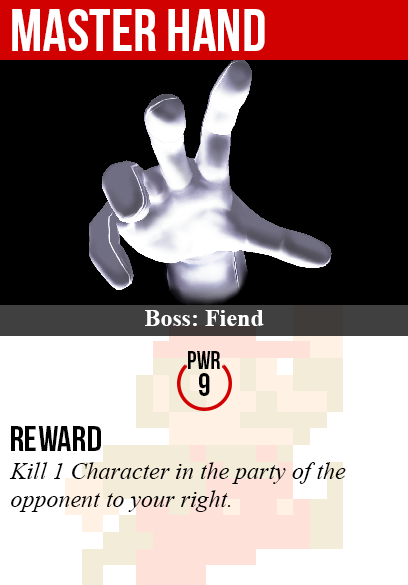
<style>
.page{position:relative;width:408px;height:585px;background:#000000}
.page>*{position:absolute;margin:0}
.t1{font:60px "BebasNeue";color:#ffffff}
.t2{font:24px "TimesNewRomanPS-BoldMT";color:#ffffff}
.t3{font:25px "BebasNeue";color:#000000}
.t4{font:32px "BebasNeue";color:#000000}
.t5{font:36px "BebasNeue";color:#000000}
.t6{font:24px "TimesNewRomanPS-ItalicMT";color:#000000}
</style>
<div class="page">
<p class="t1" style="left:12px;top:9px;width:253px;height:42px">master hand</p>
<p class="t2" style="left:145px;top:310px;width:119px;height:16px">Boss: Fiend</p>
<p class="t3" style="left:188px;top:351px;width:32px;height:18px">pwr</p>
<p class="t4" style="left:199px;top:373px;width:11px;height:23px">9</p>
<p class="t5" style="left:11px;top:426px;width:90px;height:25px">reward</p>
<p class="t6" style="left:9px;top:462px;width:337px;height:50px">Kill 1 Character in the party of the<br>opponent to your right.</p>
</div>
